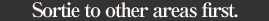
<style>
.page{position:relative;width:269px;height:21px;background:#333333}
.page>*{position:absolute;margin:0}
.t1{font:20px "RyuminPro-ExBold";letter-spacing:-0.08em;color:#fff7f3}
</style>
<div class="page">
<p class="t1" style="left:32px;top:2px;width:206px;height:16px">Sortie to other areas first.</p>
</div>
